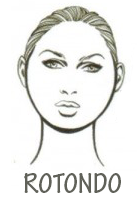
<style>
.page{position:relative;width:140px;height:200px;background:#ffffff}
.page>*{position:absolute;margin:0}
.t1{font:30px "TektonPro-BoldCond";color:#606159}
</style>
<div class="page">
<p class="t1" style="left:24px;top:173px;width:97px;height:20px">ROTONDO</p>
</div>
